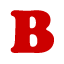
<style>
.page{position:relative;width:64px;height:64px;background:#ffffff}
.page>*{position:absolute;margin:0}
.t1{font:60px "CooperBlackStd";color:#cc0000}
</style>
<div class="page">
<p class="t1" style="left:10px;top:10px;width:44px;height:43px">B</p>
</div>
